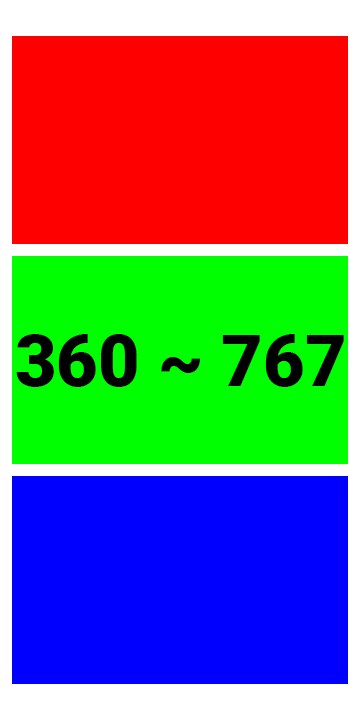
<style>
.page{position:relative;width:360px;height:720px;background:#ff0000}
.page>*{position:absolute;margin:0}
.t1{font:72px "Roboto-Black";color:#000000}
</style>
<div class="page">
<p class="t1" style="left:16px;top:334px;width:328px;height:53px">360 ~ 767</p>
</div>
